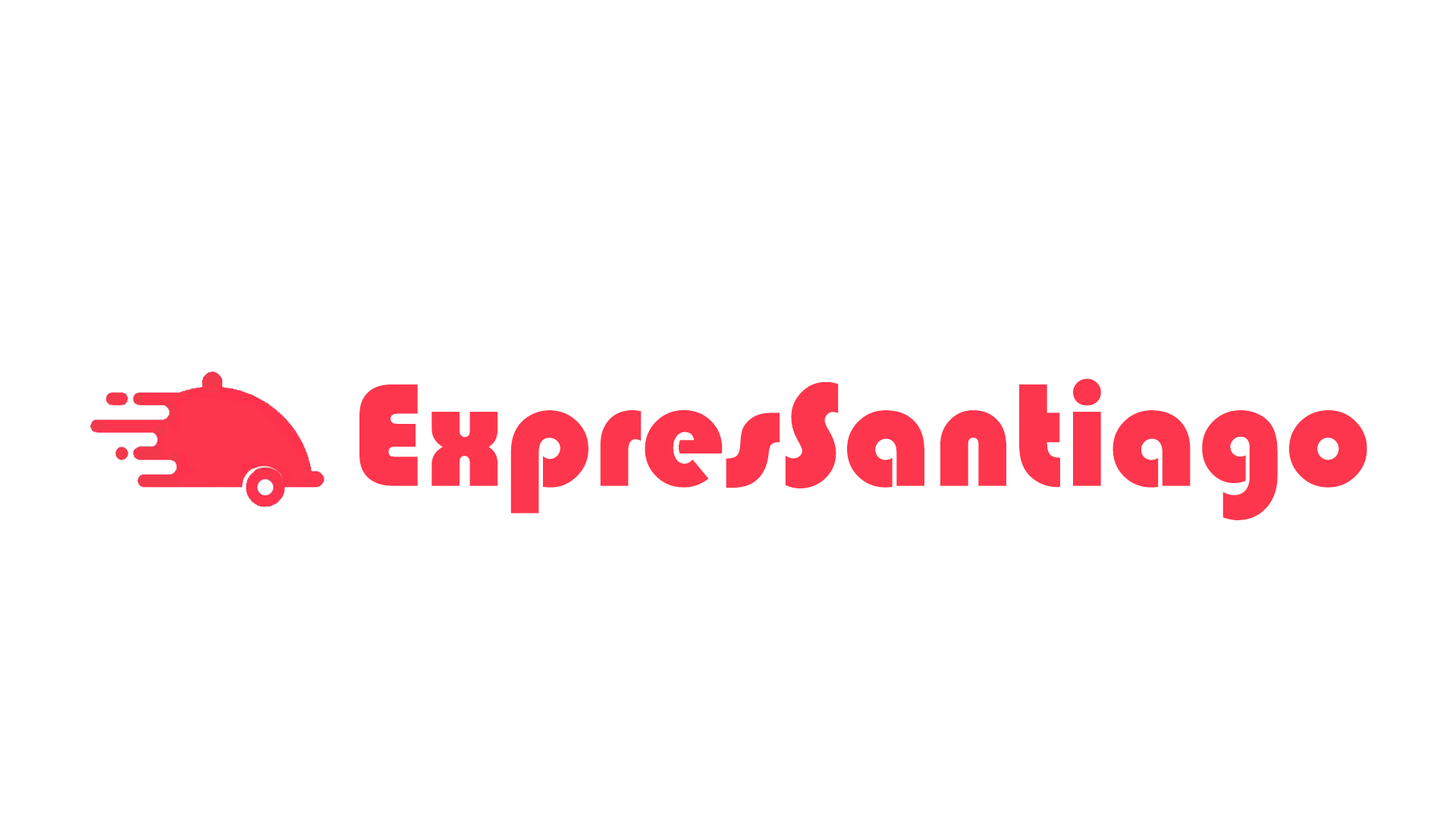
<style>
.page{position:relative;width:1456px;height:819px;background:#ffffff}
.page>*{position:absolute;margin:0}
.t1{font:151.9px "Bauhaus93";color:#fd364d}
</style>
<div class="page">
<p class="t1" style="left:359px;top:378px;width:1008px;height:142px">ExpresSantiago</p>
</div>
